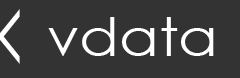
<style>
.page{position:relative;width:240px;height:78px;background:#333333}
.page>*{position:absolute;margin:0}
.t1{font:103.5px "CenturyGothic";color:#ffffff;scale:0.38 1}
.t2{font:53.1px "CenturyGothic";color:#ffffff;scale:1.1 1}
</style>
<div class="page">
<p class="t1" style="left:0px;top:9px;width:20px;height:55px">&lt;</p>
<p class="t2" style="left:48px;top:17px;width:166px;height:39px">vdata</p>
</div>
